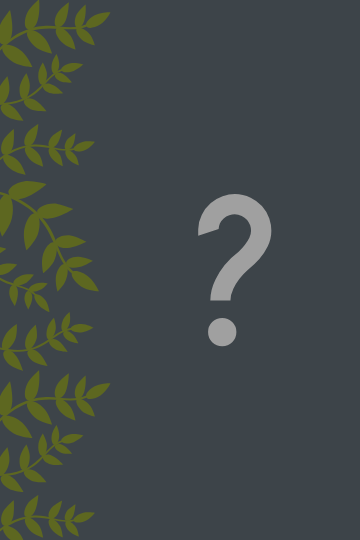
<style>
.page{position:relative;width:360px;height:540px;background:#3d4449}
.page>*{position:absolute;margin:0}
.t1{font:200px "CaviarDreams-Bold";color:#a0a0a0}
</style>
<div class="page">
<p class="t1" style="left:198px;top:194px;width:74px;height:153px">?</p>
</div>
